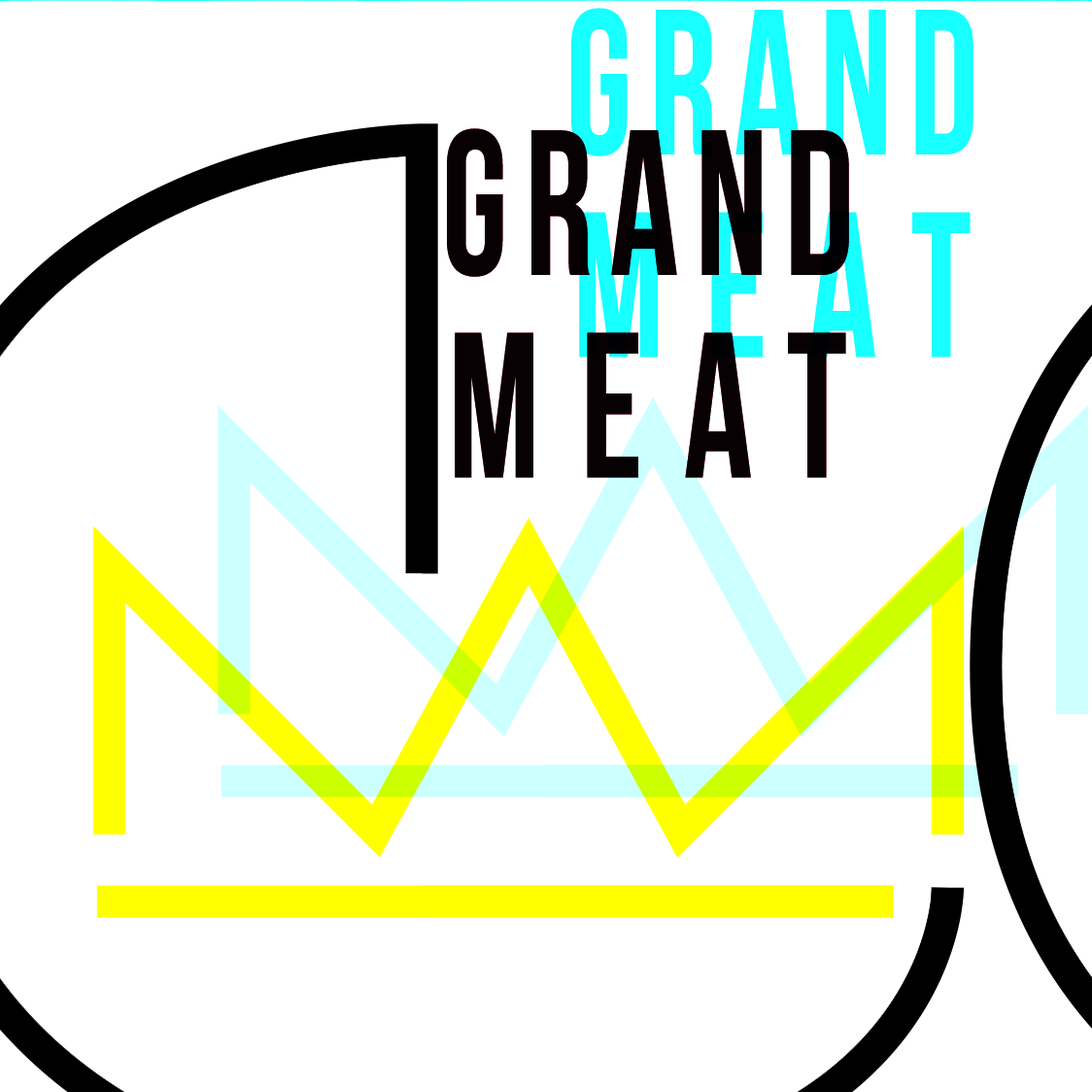
<style>
.page{position:relative;width:1092px;height:1092px;background:#ffffff}
.page>*{position:absolute;margin:0}
.t1{font:206.4px/202.4px "BebasNeueBold";letter-spacing:0.1em;color:#17ffff;scale:0.82 1}
.t2{font:206.4px/202.4px "BebasNeueBold";letter-spacing:0.24em;color:#17ffff;scale:0.82 1}
</style>
<div class="page">
<p class="t1" style="left:571px;top:7px;width:402px;height:350px;text-align:center">Grand<br><span class="t2">meat</span></p>
</div>
